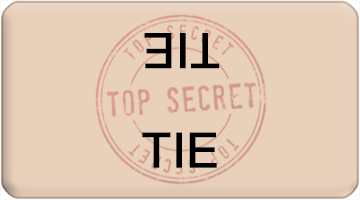
<style>
.page{position:relative;width:360px;height:200px;background:#e8d0bb}
.page>*{position:absolute;margin:0}
.t1{font:48px "ArialMT";color:#000000;font-weight:bold}
</style>
<div class="page">
<p class="t1" style="left:144px;top:33px;width:76px;height:36px;rotate:180deg">TIE</p>
<p class="t1" style="left:142px;top:132px;width:75px;height:36px">TIE</p>
</div>
